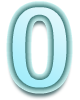
<style>
.page{position:relative;width:80px;height:100px;background:#ffffff}
.page>*{position:absolute;margin:0}
.t1{font:117.6px "Arial-BoldMT";scale:1.09 1}
</style>
<div class="page">
<p class="t1" style="left:9px;top:4px;width:61px;height:87px">0</p>
</div>
